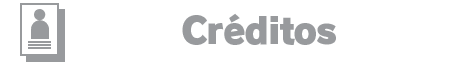
<style>
.page{position:relative;width:464px;height:66px;background:#ffffff}
.page>*{position:absolute;margin:0}
.t1{font:36px "RodinPro-UB";letter-spacing:-0.039em;color:#989a9d}
</style>
<div class="page">
<p class="t1" style="left:182px;top:13px;width:154px;height:32px">Créditos</p>
</div>
